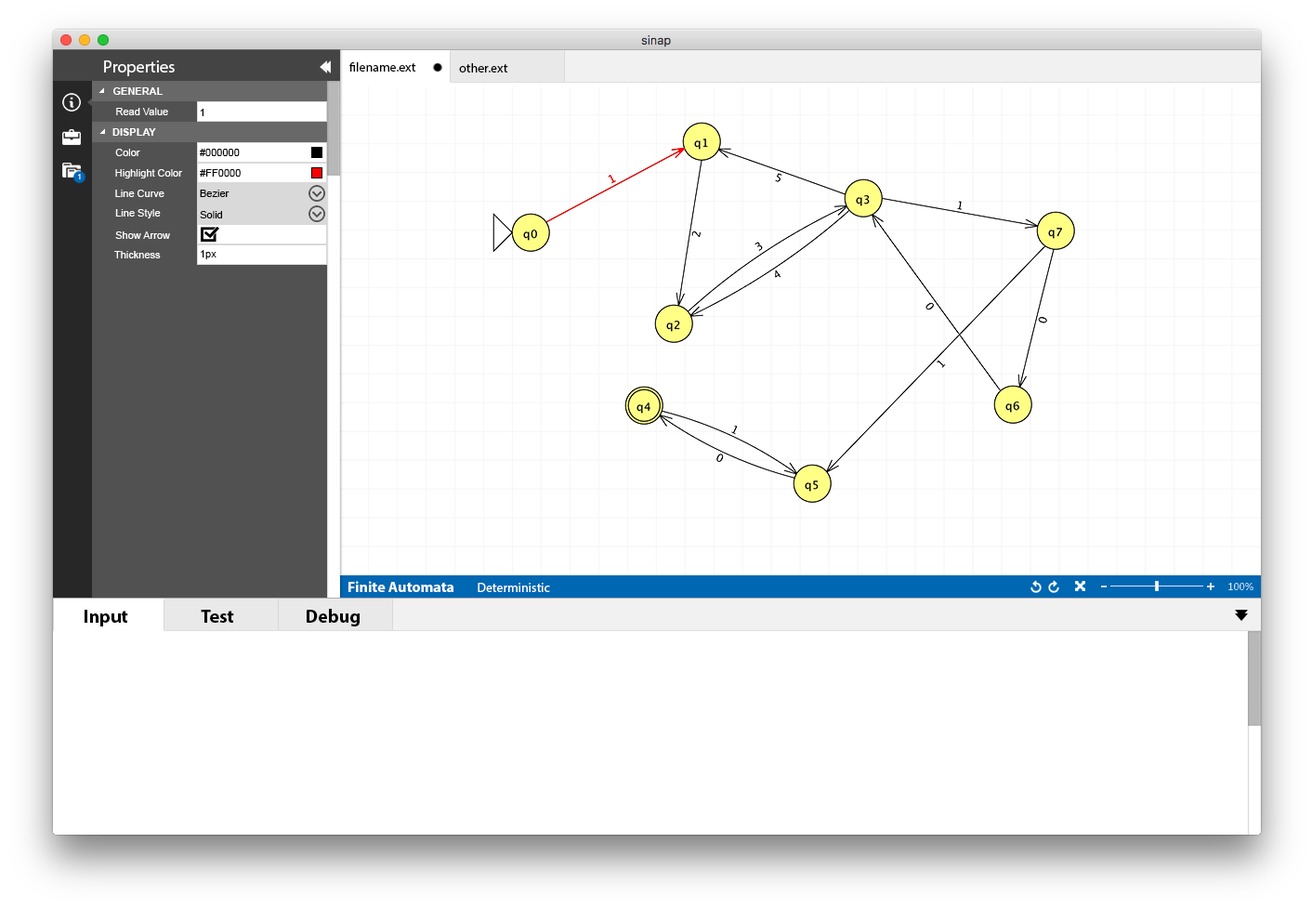
<style>
.page{position:relative;width:1312px;height:909px;background:#ffffff}
.page>*{position:absolute;margin:0}
.t1{font:16.7px "MyriadPro-Regular";color:#ffffff}
.t2{font:13px "MyriadPro-Regular";color:#000000}
.t3{font:10.2px "Arial-BoldMT";color:#ffffff}
.t4{font:10.2px "ArialMT";color:#ffffff}
.t5{font:10.2px "ArialMT";color:#000000}
.t6{font:7.4px "ArialMT"}
.t7{font:14.9px "MyriadPro-Bold";color:#ffffff}
.t8{font:13px "MyriadPro-Regular";color:#ffffff}
.t9{font:18.6px "MyriadPro-Bold";color:#000000}
</style>
<div class="page">
<p class="t1" style="left:104px;top:60px;width:71px;height:16px">Properties</p>
<p class="t2" style="left:349px;top:62px;width:67px;height:10px">filename.ext</p>
<p class="t2" style="left:459px;top:63px;width:49px;height:9px">other.ext</p>
<p class="t3" style="left:113px;top:87px;width:50px;height:8px">GENERAL</p>
<p class="t4" style="left:116px;top:108px;width:52px;height:7px">Read Value</p>
<p class="t5" style="left:200px;top:109px;width:4px;height:7px">1</p>
<p class="t3" style="left:112px;top:128px;width:44px;height:8px">DISPLAY</p>
<p class="t4" style="left:115px;top:149px;width:25px;height:7px">Color</p>
<p class="t5" style="left:200px;top:149px;width:40px;height:7px">#000000</p>
<p class="t6" style="left:78px;top:174px;width:3px;height:5px">1</p>
<p class="t4" style="left:115px;top:169px;width:68px;height:9px">Highlight Color</p>
<p class="t5" style="left:200px;top:169px;width:41px;height:8px">#FF0000</p>
<p class="t4" style="left:115px;top:190px;width:49px;height:7px">Line Curve</p>
<p class="t5" style="left:200px;top:190px;width:30px;height:7px">Bezier</p>
<p class="t4" style="left:115px;top:209px;width:46px;height:9px">Line Style</p>
<p class="t5" style="left:200px;top:211px;width:22px;height:7px">Solid</p>
<p class="t4" style="left:115px;top:231px;width:55px;height:8px">Show Arrow</p>
<p class="t4" style="left:114px;top:251px;width:47px;height:7px">Thickness</p>
<p class="t5" style="left:201px;top:250px;width:16px;height:9px">1px</p>
<p class="t7" style="left:348px;top:581px;width:105px;height:11px">Finite Automata</p>
<p class="t8" style="left:478px;top:583px;width:72px;height:9px">Deterministic</p>
<p class="t9" style="left:85px;top:610px;width:43px;height:16px">Input</p>
<p class="t9" style="left:201px;top:610px;width:33px;height:13px">Test</p>
<p class="t9" style="left:307px;top:609px;width:53px;height:17px">Debug</p>
</div>
